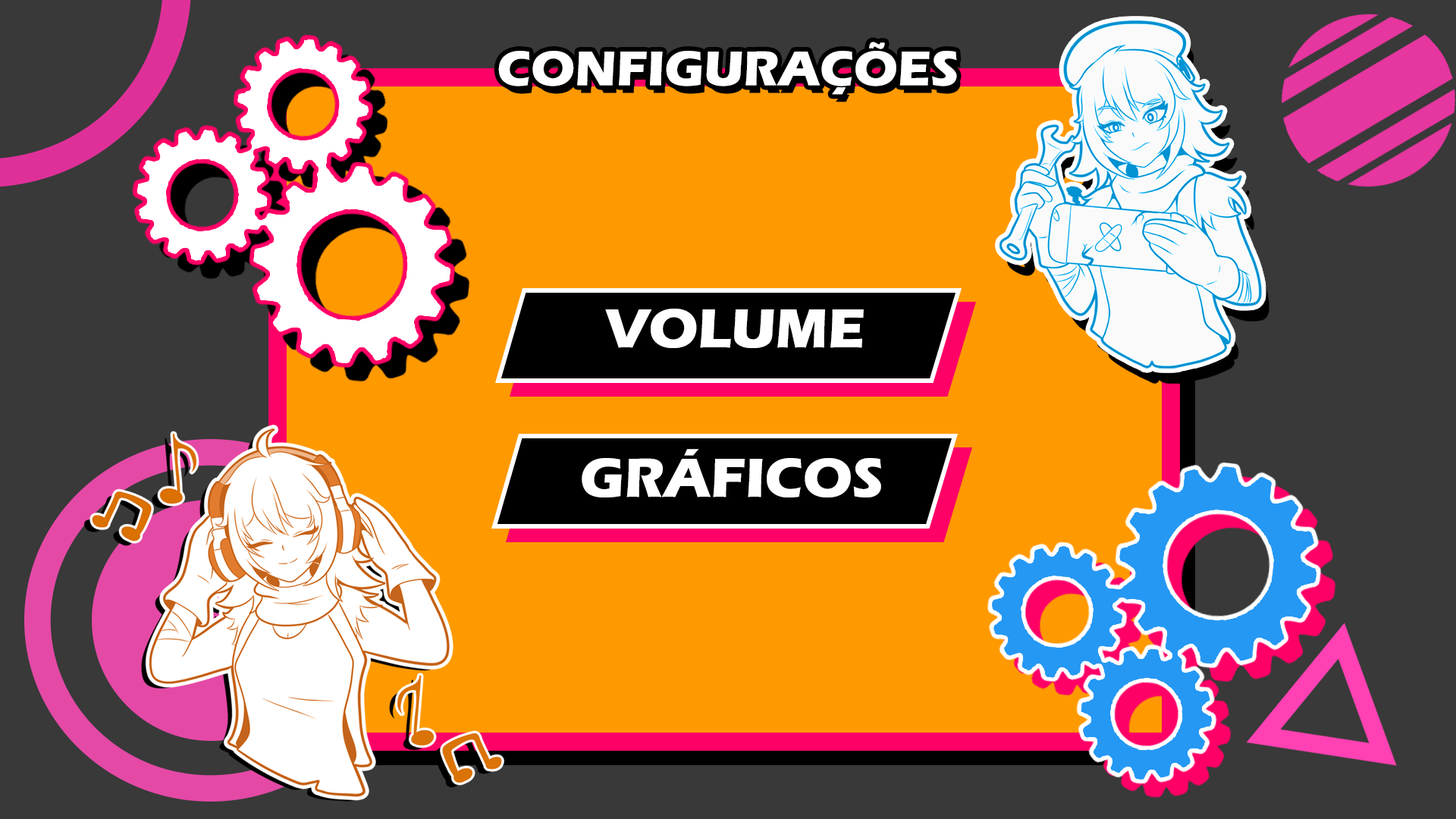
<style>
.page{position:relative;width:1456px;height:819px;background:#393939}
.page>*{position:absolute;margin:0}
.t1{font:50.6px "ErasITC-Bold";color:#ffffff}
.t2{font:56.9px "ErasITC-Bold";color:#ffffff}
</style>
<div class="page">
<p class="t1" style="left:498px;top:42px;width:459px;height:53px">CONFIGURAÇÕES</p>
<p class="t2" style="left:605px;top:309px;width:259px;height:39px">VOLUME</p>
<p class="t2" style="left:582px;top:449px;width:299px;height:48px">GRÁFICOS</p>
</div>
